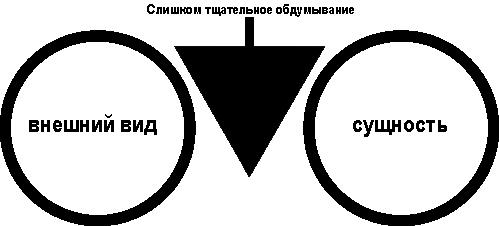
<style>
.page{position:relative;width:499px;height:226px;background:#ffffff}
.page>*{position:absolute;margin:0}
.t1{font:14px "ArialNarrow-Bold";color:#000000}
.t2{font:24px "ArialNarrow-Bold";color:#000000}
</style>
<div class="page">
<p class="t1" style="left:147px;top:4px;width:207px;height:13px">Слишком тщательное обдумывание</p>
<p class="t2" style="left:29px;top:114px;width:128px;height:21px">внешний вид</p>
<p class="t2" style="left:353px;top:120px;width:94px;height:17px">сущность</p>
</div>
